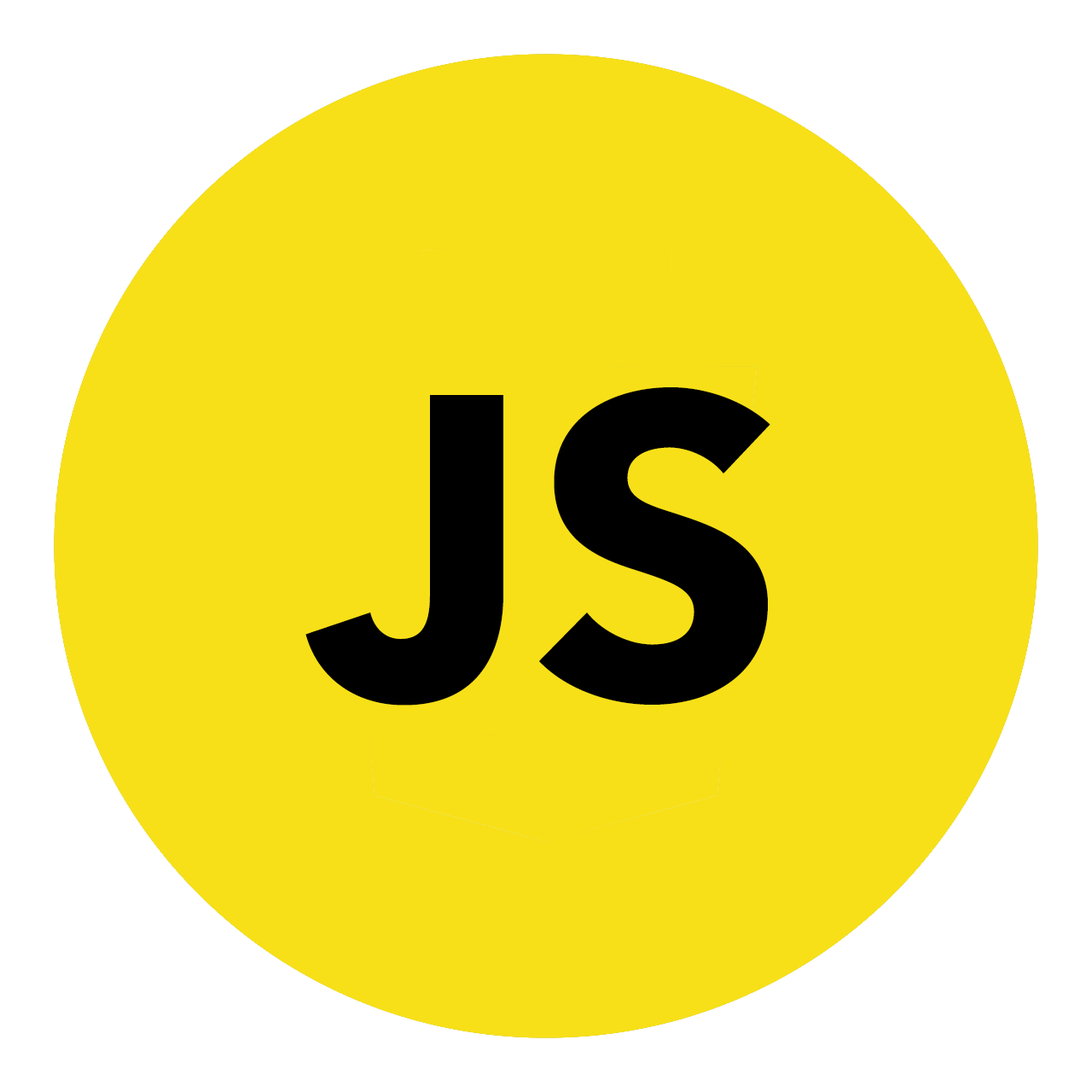
<style>
.page{position:relative;width:1092px;height:1092px;background:#f7e018}
.page>*{position:absolute;margin:0}
.t1{font:426.6px "AvenirNextLTPro-Bold";color:#000000}
</style>
<div class="page">
<p class="t1" style="left:305px;top:387px;width:465px;height:319px">JS</p>
</div>
